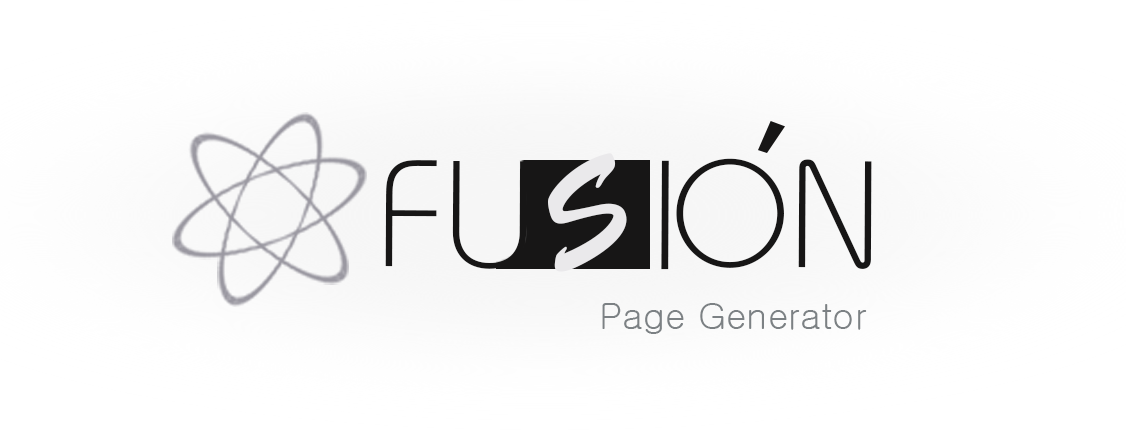
<style>
.page{position:relative;width:1126px;height:430px;background:#ffffff}
.page>*{position:absolute;margin:0}
.t1{font:151.5px "BauhausC-Light";color:#171616}
.t2{font:129.8px "BrushScriptStd";color:#eae9eb}
.t3{font:151.5px "Bisque";color:#171616}
.t4{font:36px "Gulim";color:#7c8184}
</style>
<div class="page">
<p class="t1" style="left:385px;top:160px;width:142px;height:109px">FU</p>
<p class="t2" style="left:548px;top:153px;width:79px;height:119px;rotate:-25deg">S</p>
<p class="t3" style="left:661px;top:160px;width:8px;height:110px">I</p>
<p class="t1" style="left:676px;top:158px;width:196px;height:111px">ON</p>
<p class="t4" style="left:602px;top:303px;width:265px;height:31px">Page Generator</p>
</div>
